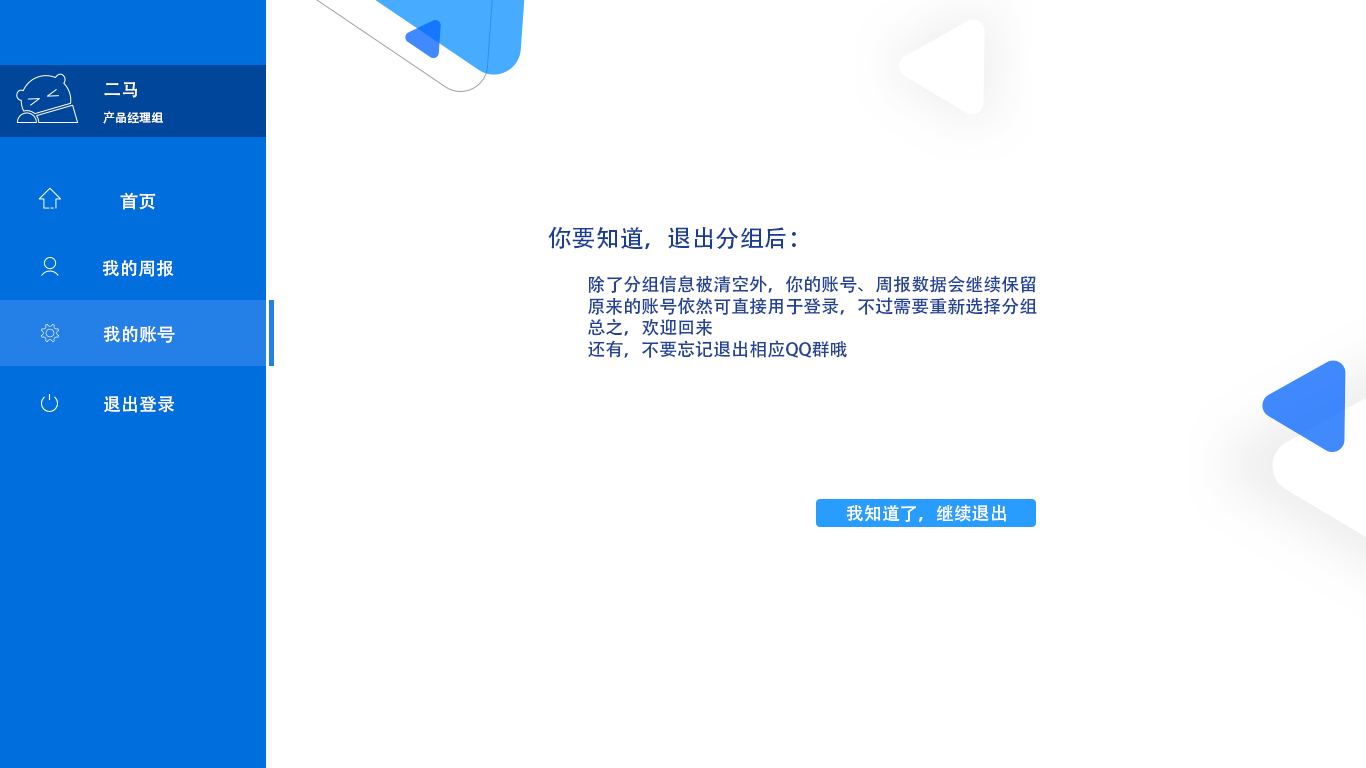
<style>
.page{position:relative;width:1366px;height:768px;background:#ffffff}
.page>*{position:absolute;margin:0}
.t1{font:18px "AdobeHeitiStd-Regular";color:#ffffff}
.t2{font:12px "AdobeHeitiStd-Regular";color:#ffffff}
.t3{font:24px "AdobeHeitiStd-Regular";color:#183e96}
.t4{font:18px "AdobeHeitiStd-Regular";color:#214499}
.t5{font:18px "AdobeHeitiStd-Regular";color:#fefefe}
</style>
<div class="page">
<p class="t1" style="left:104px;top:82px;width:33px;height:16px">二马</p>
<p class="t2" style="left:103px;top:111px;width:60px;height:13px">产品经理组</p>
<p class="t1" style="left:120px;top:192px;width:36px;height:18px">首页</p>
<p class="t3" style="left:548px;top:226px;width:248px;height:24px">你要知道，退出分组后：</p>
<p class="t1" style="left:102px;top:259px;width:72px;height:18px">我的周报</p>
<p class="t4" style="left:588px;top:275px;width:449px;height:83px">除了分组信息被清空外，你的账号、周报数据会继续保留<br>原来的账号依然可直接用于登录，不过需要重新选择分组<br>总之，欢迎回来<br>还有，不要忘记退出相应QQ群哦</p>
<p class="t1" style="left:103px;top:325px;width:72px;height:18px">我的账号</p>
<p class="t1" style="left:104px;top:395px;width:70px;height:18px">退出登录</p>
<p class="t5" style="left:846px;top:504px;width:160px;height:18px">我知道了，继续退出</p>
</div>
